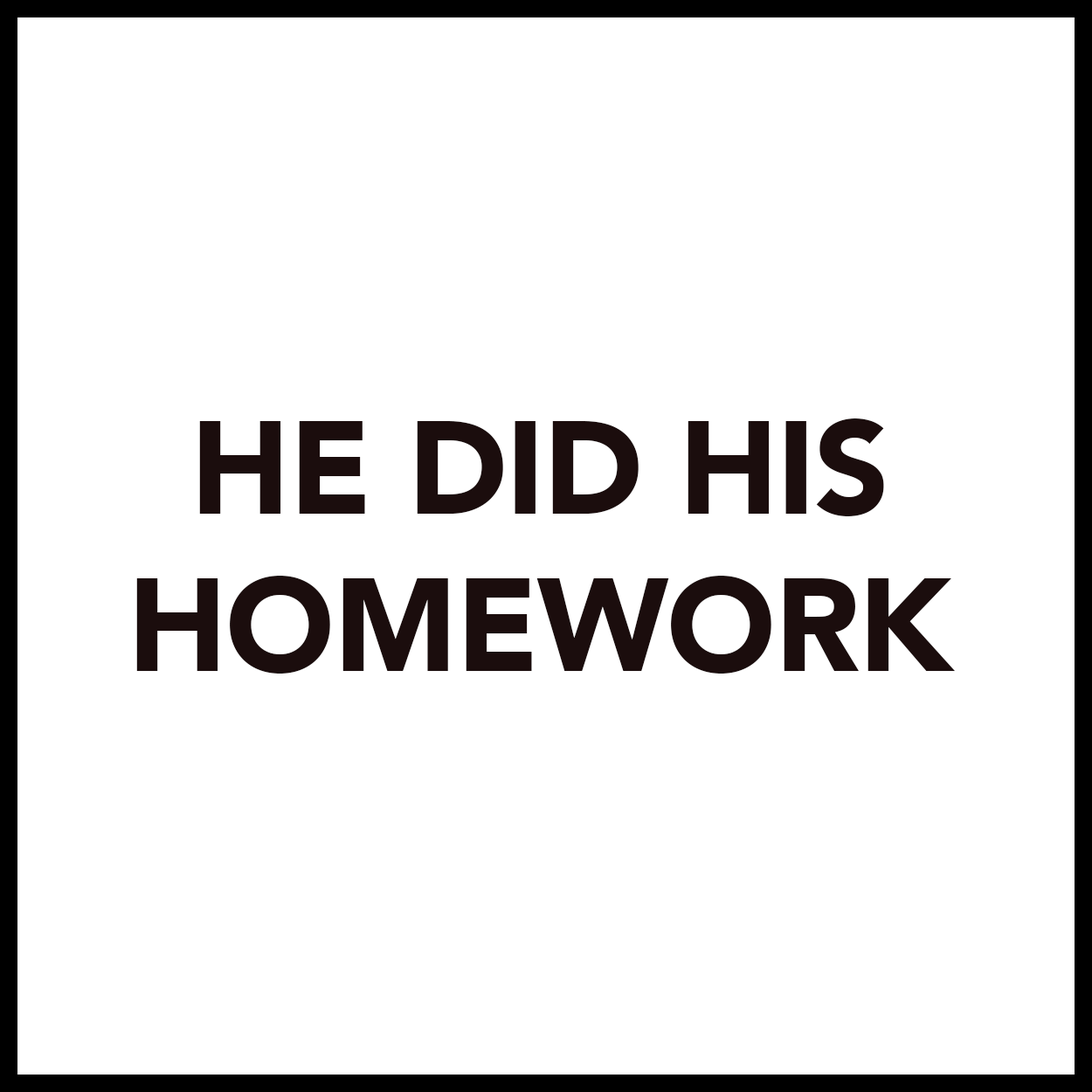
<style>
.page{position:relative;width:1092px;height:1092px;background:#ffffff}
.page>*{position:absolute;margin:0}
.t1{font:131px "Avenir-Black";letter-spacing:-0.01em;color:#1b0d0d}
</style>
<div class="page">
<p class="t1" style="left:136px;top:418px;width:819px;height:256px;text-align:center">HE DID HIS<br>HOMEWORK</p>
</div>
